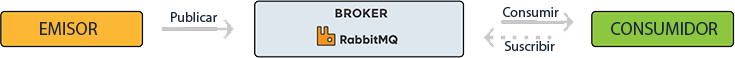
<style>
.page{position:relative;width:735px;height:58px;background:#ffffff}
.page>*{position:absolute;margin:0}
.t1{font:14px "MyriadPro-Regular";color:#19273b}
.t2{font:18px "MyriadPro-Regular";color:#19273b}
</style>
<div class="page">
<p class="t1" style="left:171px;top:12px;width:47px;height:10px">Publicar</p>
<p class="t1" style="left:503px;top:7px;width:56px;height:10px">Consumir</p>
<p class="t2" style="left:40px;top:22px;width:58px;height:13px">EMISOR</p>
<p class="t2" style="left:611px;top:22px;width:107px;height:13px">CONSUMIDOR</p>
<p class="t1" style="left:504px;top:41px;width:51px;height:10px">Suscribir</p>
</div>
